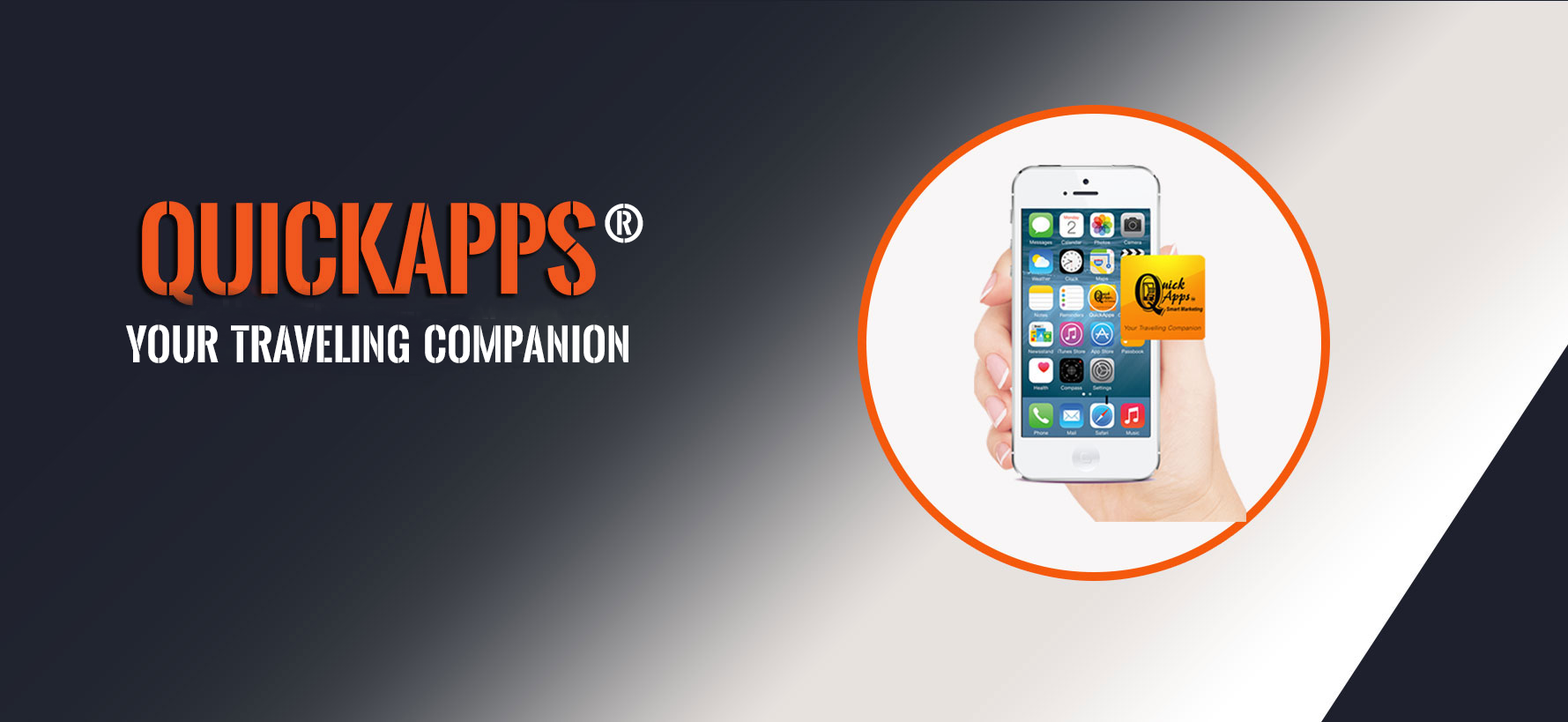
<style>
.page{position:relative;width:1568px;height:722px}
.page>*{position:absolute;margin:0}
.t1{font:55.5px "OswaldStencil-Bold";letter-spacing:0.075em;color:#ffffff}
.t2{font:49.4px "OswaldStencil-Bold";letter-spacing:0.075em;color:#ffffff}
.t3{font:42.3px "OswaldStencil-Bold";color:#ffffff}
</style>
<div class="page">
<p class="t1" style="left:605px;top:204px;width:38px;height:39px"><span class="t2"> </span>®</p>
<p class="t3" style="left:126px;top:324px;width:502px;height:39px">Your  Traveling  Companion</p>
</div>
